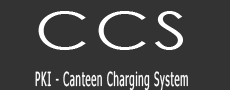
<style>
.page{position:relative;width:230px;height:90px;background:#333333}
.page>*{position:absolute;margin:0}
.t1{font:52.3px "CenturyGothic";letter-spacing:0.075em;color:#ffffff;scale:1.29 1}
.t2{font:19.6px "Tahoma";letter-spacing:0.075em;color:#ffffff;scale:0.49 1}
</style>
<div class="page">
<p class="t1" style="left:38px;top:11px;width:145px;height:39px">CCS</p>
<p class="t2" style="left:35px;top:71px;width:153px;height:20px">PKI - Canteen Charging System</p>
</div>
